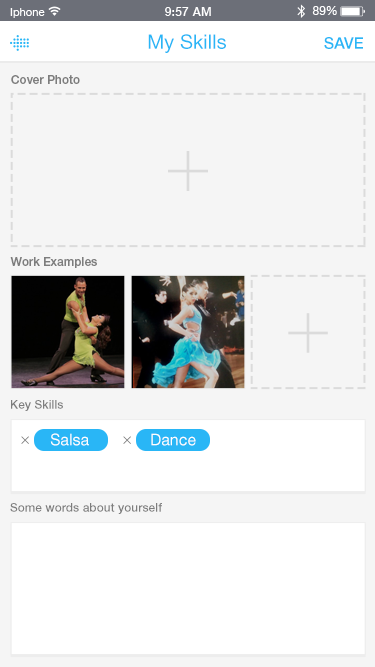
<style>
.page{position:relative;width:375px;height:667px;background:#f5f5f5}
.page>*{position:absolute;margin:0}
.t1{font:20px "HelveticaNeueCyr-Roman";color:#29b6f6}
.t2{font:16px "HelveticaNeueCyr-Medium";color:#29b6f6}
.t3{font:12px "HelveticaNeueCyr-Medium";color:#7d7d7d}
.t4{font:16px "HelveticaNeueCyr-Roman";color:#fffefe}
</style>
<div class="page">
<p class="t1" style="left:148px;top:34px;width:78px;height:19px">My Skills</p>
<p class="t2" style="left:324px;top:37px;width:39px;height:12px">SAVE</p>
<p class="t3" style="left:11px;top:75px;width:69px;height:9px">Cover Photo</p>
<p class="t3" style="left:10px;top:257px;width:87px;height:11px">Work Examples</p>
<p class="t3" style="left:11px;top:400px;width:52px;height:11px">Key Skills</p>
<p class="t4" style="left:50px;top:433px;width:39px;height:13px">Salsa</p>
<p class="t4" style="left:151px;top:433px;width:45px;height:13px">Dance</p>
<p class="t3" style="left:10px;top:503px;width:152px;height:11px">Some words about yourself</p>
</div>
